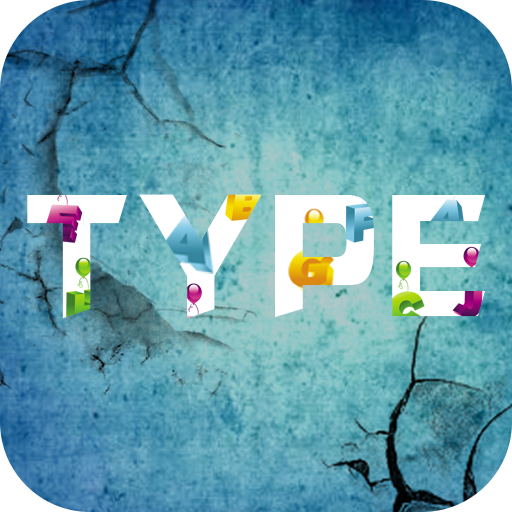
<style>
.page{position:relative;width:512px;height:512px}
.page>*{position:absolute;margin:0}
.t1{font:180.1px "HYk2gj";color:#ffffff;scale:0.83 1}
</style>
<div class="page">
<p class="t1" style="left:27px;top:194px;width:458px;height:125px">TYPE</p>
</div>
